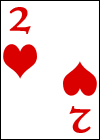
<style>
.page{position:relative;width:100px;height:140px;background:#ffffff}
.page>*{position:absolute;margin:0}
.t1{font:60px "HighTowerText-Reg";color:#da0000}
</style>
<div class="page">
<p class="t1" style="left:9px;top:7px;width:22px;height:27px">2</p>
<p class="t1" style="left:69px;top:106px;width:22px;height:27px;rotate:180deg">2</p>
</div>
